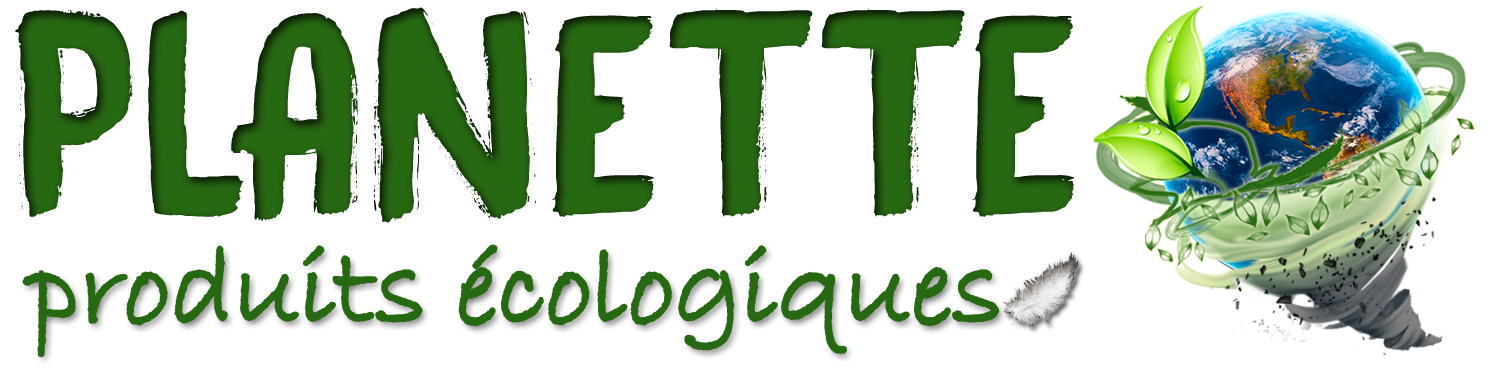
<style>
.page{position:relative;width:1491px;height:368px;background:#ffffff}
.page>*{position:absolute;margin:0}
.t1{font:250px "DKBlackBamboo";color:#276812;scale:1.07 1}
.t2{font:108.3px "BradleyHandITC";color:#276812;scale:1.07 1}
</style>
<div class="page">
<p class="t1" style="left:15px;top:7px;width:1059px;height:216px">PLANETTE</p>
<p class="t2" style="left:24px;top:246px;width:974px;height:110px">produits écologiques</p>
</div>
